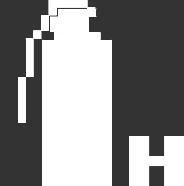
<style>
.page{position:relative;width:184px;height:186px;background:#333333}
.page>*{position:absolute;margin:0}
.t1{font:100px "UpheavalPro-Regular";color:#ffffff}
</style>
<div class="page">
<p class="t1" style="left:129px;top:136px;width:56px;height:50px">H</p>
</div>
